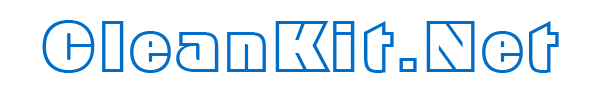
<style>
.page{position:relative;width:600px;height:100px;background:#ffffff}
.page>*{position:absolute;margin:0}
.t1{font:72px "G2Geometric885BT-RegularD";letter-spacing:0.01em;color:#006dca}
</style>
<div class="page">
<p class="t1" style="left:42px;top:20px;width:517px;height:53px">CleanKit.Net</p>
</div>
